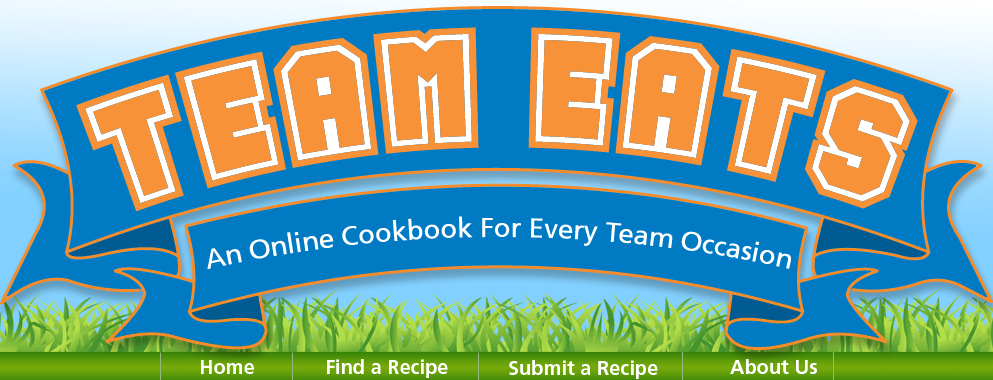
<style>
.page{position:relative;width:993px;height:380px;background:#007ac3}
.page>*{position:absolute;margin:0}
.t1{font:153px "Varsity";color:#f79239}
.t2{font:27px/35px "Frutiger-Roman";color:#ffffff}
.t3{font:20px "Frutiger-Bold";color:#fefefe}
.t4{font:20px "Frutiger-Bold";color:#ffffff}
</style>
<div class="page">
<p class="t1" style="left:76px;top:27px;width:842px;height:185px">TEAM EATS</p>
<p class="t2" style="left:207px;top:216px;width:584px;height:54px">An Online Cookbook For Every Team Occasion</p>
<p class="t3" style="left:201px;top:360px;width:53px;height:14px">Home</p>
<p class="t4" style="left:327px;top:359px;width:121px;height:19px">Find a Recipe</p>
<p class="t4" style="left:509px;top:360px;width:149px;height:19px">Submit a Recipe</p>
<p class="t4" style="left:730px;top:359px;width:87px;height:15px">About Us</p>
</div>
